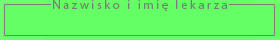
<style>
.page{position:relative;width:280px;height:40px;background:#64ff64}
.page>*{position:absolute;margin:0}
.t1{font:12.5px "MyriadPro-Regular";letter-spacing:0.2em;color:#7c7c7c}
</style>
<div class="page">
<p class="t1" style="left:53px;top:0px;width:174px;height:11px">Nazwisko i imię lekarza</p>
</div>
